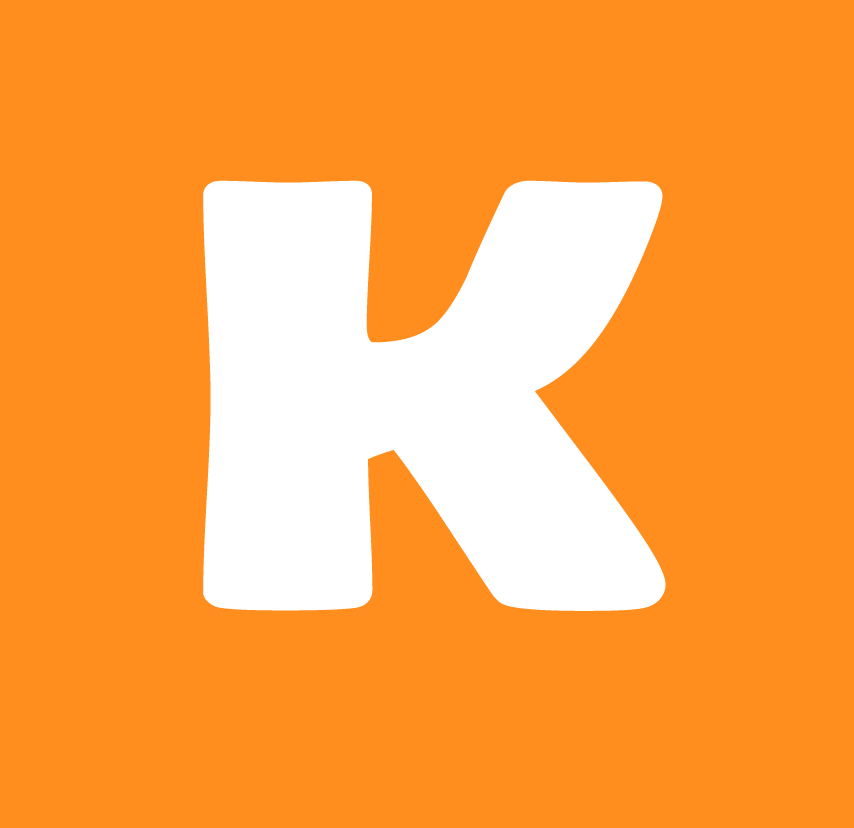
<style>
.page{position:relative;width:854px;height:828px;background:#ff8e1f}
.page>*{position:absolute;margin:0}
.t1{font:600px "BerlinSansFBDemi-Bold";color:#ffffff;font-weight:bold;scale:1.23 1}
</style>
<div class="page">
<p class="t1" style="left:203px;top:180px;width:463px;height:431px">K</p>
</div>
